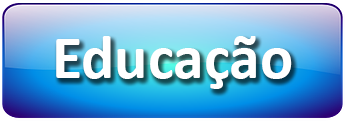
<style>
.page{position:relative;width:345px;height:121px}
.page>*{position:absolute;margin:0}
.t1{font:62px "Calibri-Bold";color:#ffffff}
</style>
<div class="page">
<p class="t1" style="left:56px;top:36px;width:236px;height:53px">Educação</p>
</div>
